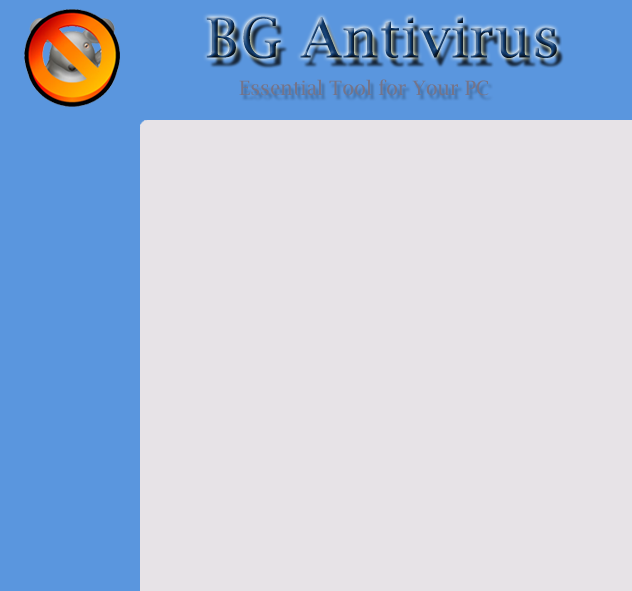
<style>
.page{position:relative;width:632px;height:591px;background:#e7e3e7}
.page>*{position:absolute;margin:0}
.t1{font:54.9px "LucidaBright";font-weight:bold}
.t2{font:19.6px "LucidaBright";color:#74748a}
</style>
<div class="page">
<p class="t1" style="left:206px;top:16px;width:351px;height:43px">BG Antivirus</p>
<p class="t2" style="left:239px;top:79px;width:250px;height:17px">Essential Tool for Your PC</p>
</div>
